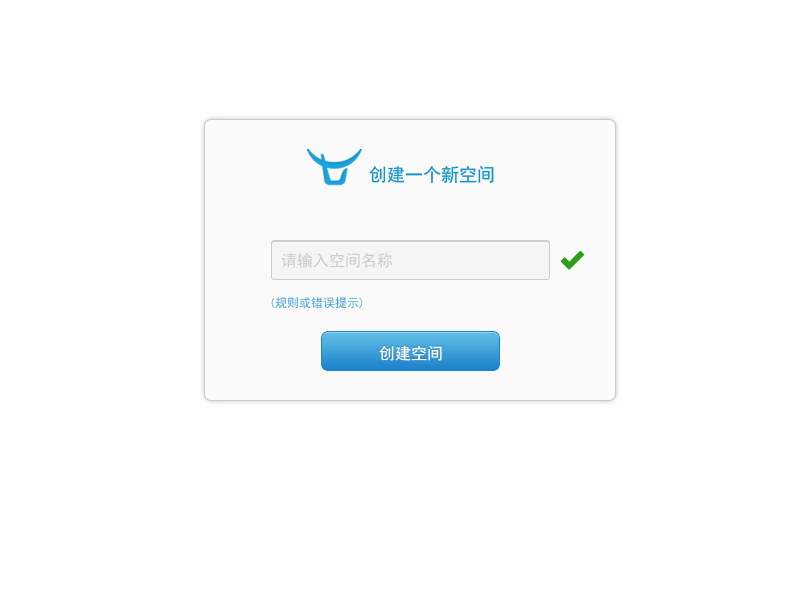
<style>
.page{position:relative;width:800px;height:600px;background:#ffffff}
.page>*{position:absolute;margin:0}
.t1{font:18px "SimHei";color:#1693c9}
.t2{font:16px "SimHei";color:#c9ccd0}
.t3{font:12px "SimHei";color:#40a1d9}
.t4{font:16px "SimHei";color:#ffffff}
</style>
<div class="page">
<p class="t1" style="left:369px;top:166px;width:125px;height:18px">创建一个新空间</p>
<p class="t2" style="left:281px;top:252px;width:112px;height:16px">请输入空间名称</p>
<p class="t3" style="left:271px;top:297px;width:92px;height:12px">(规则或错误提示)</p>
<p class="t4" style="left:379px;top:345px;width:63px;height:16px">创建空间</p>
</div>
